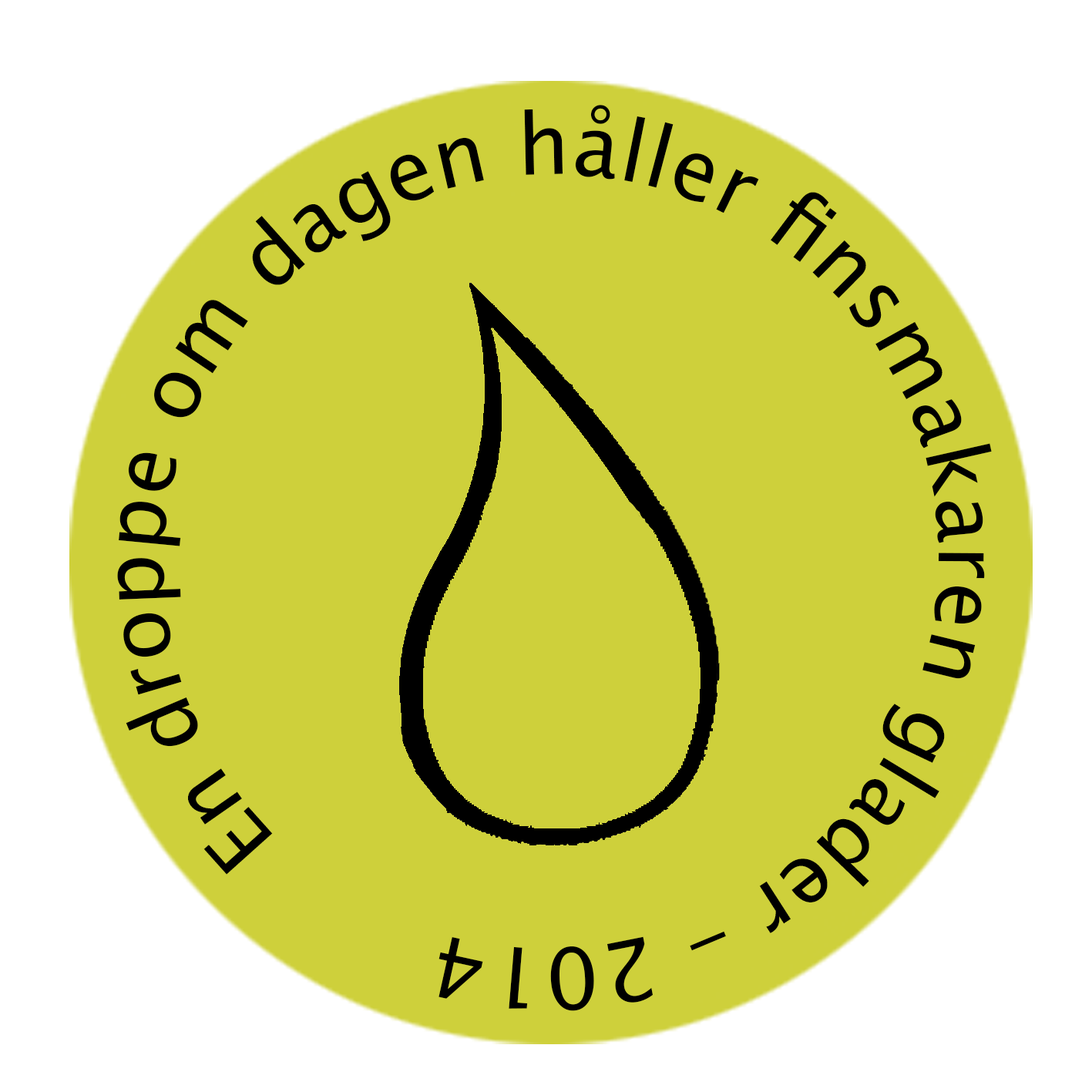
<style>
.page{position:relative;width:1092px;height:1092px;background:#ced03b}
.page>*{position:absolute;margin:0}
.t1{font:84.8px "LucidaSansUnicode";color:#000000}
</style>
<div class="page">
<p class="t1" style="left:117px;top:105px;width:875px;height:906px;rotate:-133deg">En droppe om dagen håller finsmakaren glader - 2014</p>
</div>
